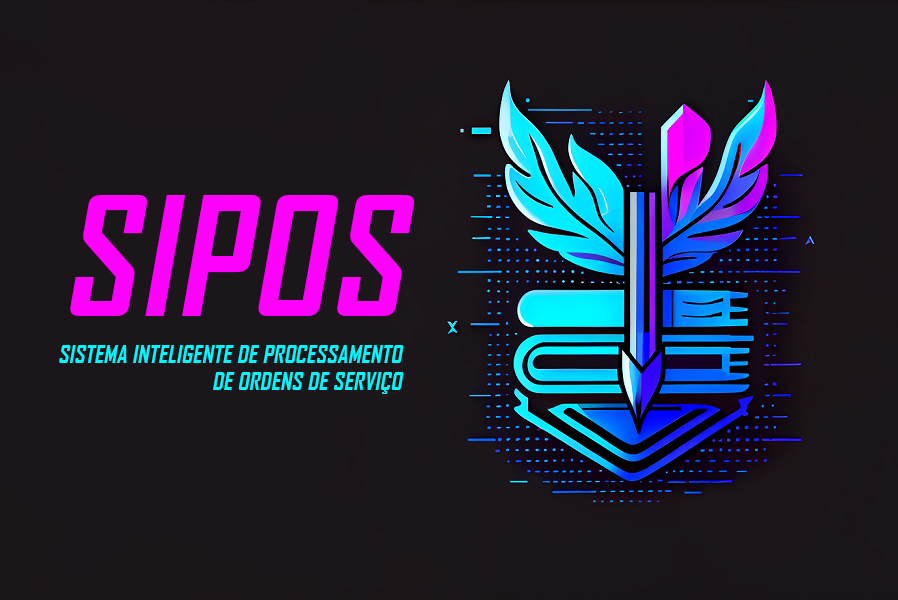
<style>
.page{position:relative;width:898px;height:600px;background:#1b1619}
.page>*{position:absolute;margin:0}
.t1{font:158.4px "AgencyFB-Bold";letter-spacing:0.022em;color:#ff00fd;text-transform:uppercase;font-style:italic}
.t2{font:22.5px "AgencyFB-Bold";letter-spacing:0.022em;color:#00f9ff;text-transform:uppercase;font-style:italic}
</style>
<div class="page">
<p class="t1" style="left:70px;top:195px;width:344px;height:121px">SIPOS</p>
<p class="t2" style="left:59px;top:345px;width:345px;height:49px;text-align:right">SISTEMA INTELIGENTE DE PROCESSAMENTO<br>DE ORDENS DE SERVIÇO</p>
</div>
